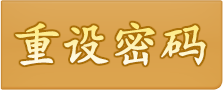
<style>
.page{position:relative;width:223px;height:91px}
.page>*{position:absolute;margin:0}
.t1{font:48px "AaBoruokaishuBldjf";letter-spacing:0.02em}
</style>
<div class="page">
<p class="t1" style="left:15px;top:22px;width:191px;height:44px">重设密码</p>
</div>
